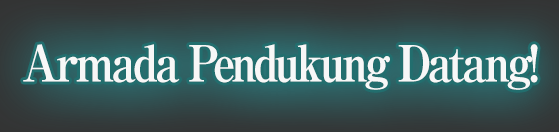
<style>
.page{position:relative;width:559px;height:132px}
.page>*{position:absolute;margin:0}
.t1{font:50px "RyuminPro-ExBold";letter-spacing:-0.08em;color:#ffffff;scale:0.9 1}
</style>
<div class="page">
<p class="t1" style="left:23px;top:44px;width:515px;height:46px;opacity:0.96">Armada Pendukung Datang!</p>
</div>
